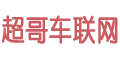
<style>
.page{position:relative;width:120px;height:60px;background:#ffffff}
.page>*{position:absolute;margin:0}
.t1{font:28.8px "STYuanti-SC-Regular";letter-spacing:0.025em;color:#ca5b60;font-weight:bold;scale:0.78 1}
</style>
<div class="page">
<p class="t1" style="left:2px;top:15px;width:116px;height:29px">超哥车联网</p>
</div>
